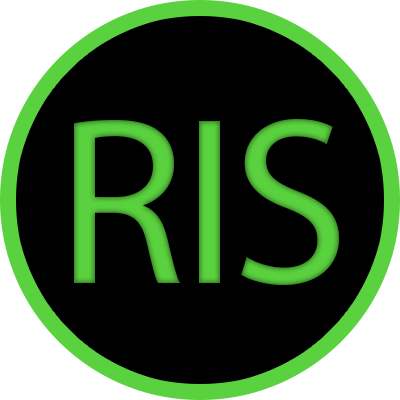
<style>
.page{position:relative;width:400px;height:400px;background:#000000}
.page>*{position:absolute;margin:0}
.t1{font:240.4px "MyriadPro-Regular";color:#5ad13e}
</style>
<div class="page">
<p class="t1" style="left:74px;top:119px;width:265px;height:166px">RIS</p>
</div>
